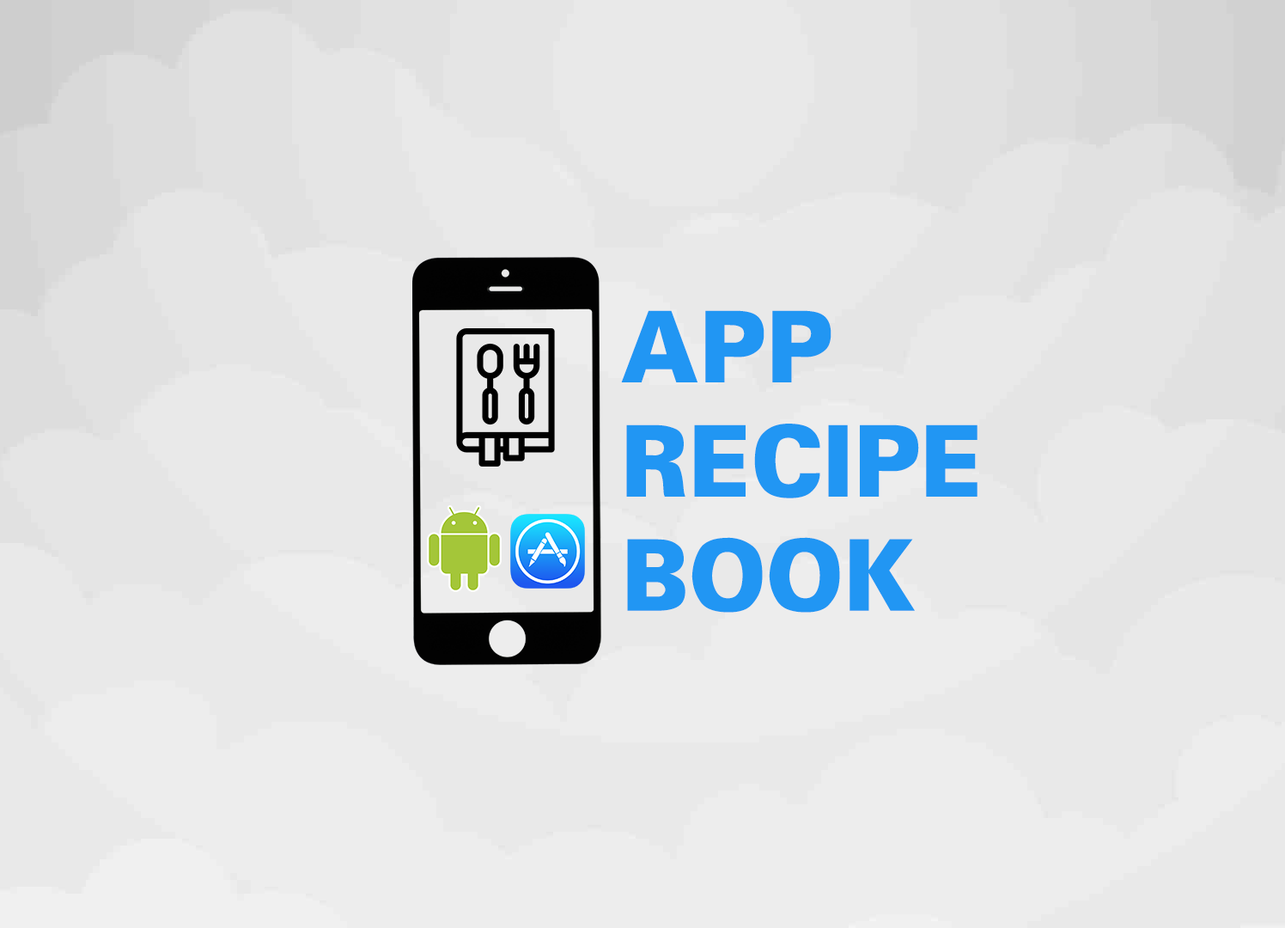
<style>
.page{position:relative;width:1285px;height:928px;background:#e9e9e9}
.page>*{position:absolute;margin:0}
.t1{font:98.5px/57.1px "Univers-Black";color:#2196f3;scale:0.94 1}
</style>
<div class="page">
<p class="t1" style="left:621px;top:310px;width:357px;height:303px">APP<br><br>RECIPE<br><br>BOOK</p>
</div>
